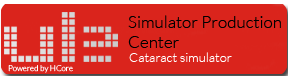
<style>
.page{position:relative;width:288px;height:76px;background:#da241c}
.page>*{position:absolute;margin:0}
.t1{font:17px "Lato-Light";color:#000000}
.t2{font:13px "Lato-Light";color:#ffffff}
.t3{font:8px "Lato-Light";color:#ffffff}
</style>
<div class="page">
<p class="t1" style="left:128px;top:15px;width:153px;height:33px">Simulator Production<br>Center</p>
<p class="t2" style="left:129px;top:52px;width:103px;height:10px">Cataract simulator</p>
<p class="t3" style="left:8px;top:65px;width:65px;height:8px">Powered by HCore</p>
</div>
